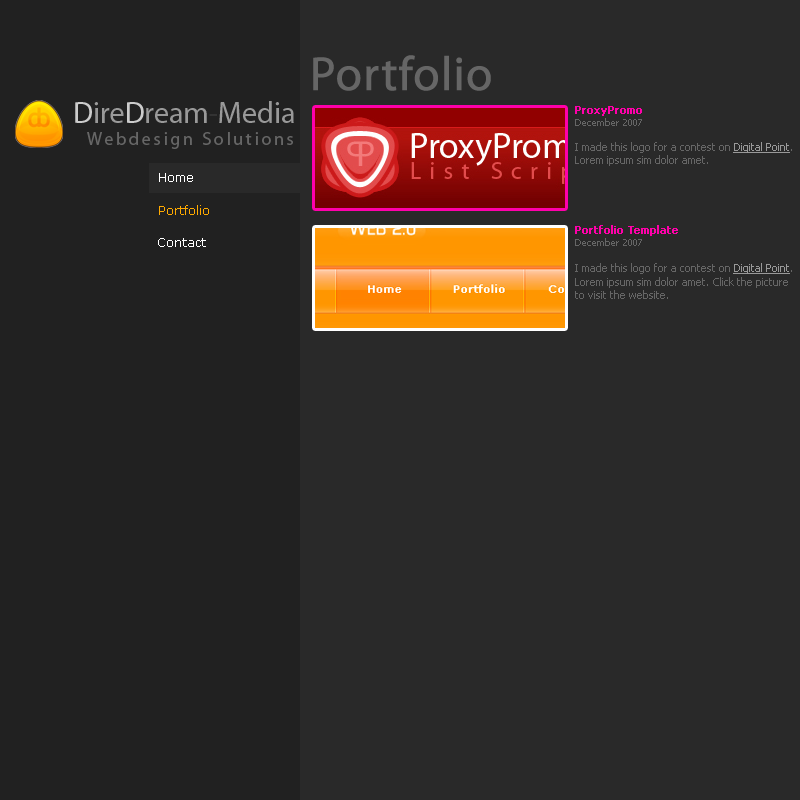
<style>
.page{position:relative;width:800px;height:800px;background:#292929}
.page>*{position:absolute;margin:0}
.t1{font:48px "MyriadPro-Regular";color:#666666;font-weight:bold}
.t2{font:30px "MyriadPro-Regular";color:#999999}
.t3{font:30px "MyriadPro-Regular";color:#cccccc}
.t4{font:30px "MyriadPro-Regular";color:#333333}
.t5{font:11px "Tahoma";color:#666666}
.t6{font:11px "Tahoma";color:#ff00aa;font-weight:bold}
.t7{font:10px "Tahoma";color:#666666}
.t8{font:11px "Tahoma";color:#999999;text-decoration:underline}
.t9{font:18px "MyriadPro-Regular";letter-spacing:0.15em;color:#666666}
.t10{font:12px "Verdana";color:#ffffff}
.t11{font:12px "Verdana";color:#ffaa00}
</style>
<div class="page">
<p class="t1" style="left:313px;top:55px;width:178px;height:36px">Portfolio</p>
<p class="t2" style="left:75px;top:101px;width:219px;height:22px"><span class="t3">D</span>ire<span class="t3">D</span>ream<span class="t4">-</span>Media</p>
<p class="t5" style="left:575px;top:106px;width:217px;height:60px"><span class="t6">ProxyPromo<br></span><span class="t7">December 2007<br><br></span>I made this logo for a contest on <span class="t8">Digital Point</span>.<br>Lorem ipsum sim dolor amet.</p>
<p class="t9" style="left:87px;top:132px;width:206px;height:17px">Webdesign Solutions</p>
<p class="t10" style="left:159px;top:173px;width:34px;height:9px">Home</p>
<p class="t11" style="left:159px;top:205px;width:50px;height:10px">Portfolio</p>
<p class="t5" style="left:575px;top:225px;width:217px;height:74px"><span class="t6">Portfolio Template<br></span><span class="t7">December 2007<br><br></span>I made this logo for a contest on <span class="t8">Digital Point</span>.<br>Lorem ipsum sim dolor amet. Click the picture<br>to visit the website.</p>
<p class="t10" style="left:158px;top:238px;width:48px;height:9px">Contact</p>
</div>
